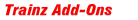
<style>
.page{position:relative;width:138px;height:20px;background:#ffffff}
.page>*{position:absolute;margin:0}
.t1{font:14.2px "Swiss721BT-BlackCondensedItalic";color:#ff0000;scale:1.2 1}
</style>
<div class="page">
<p class="t1" style="left:5px;top:4px;width:107px;height:11px">Trainz Add-Ons</p>
</div>
